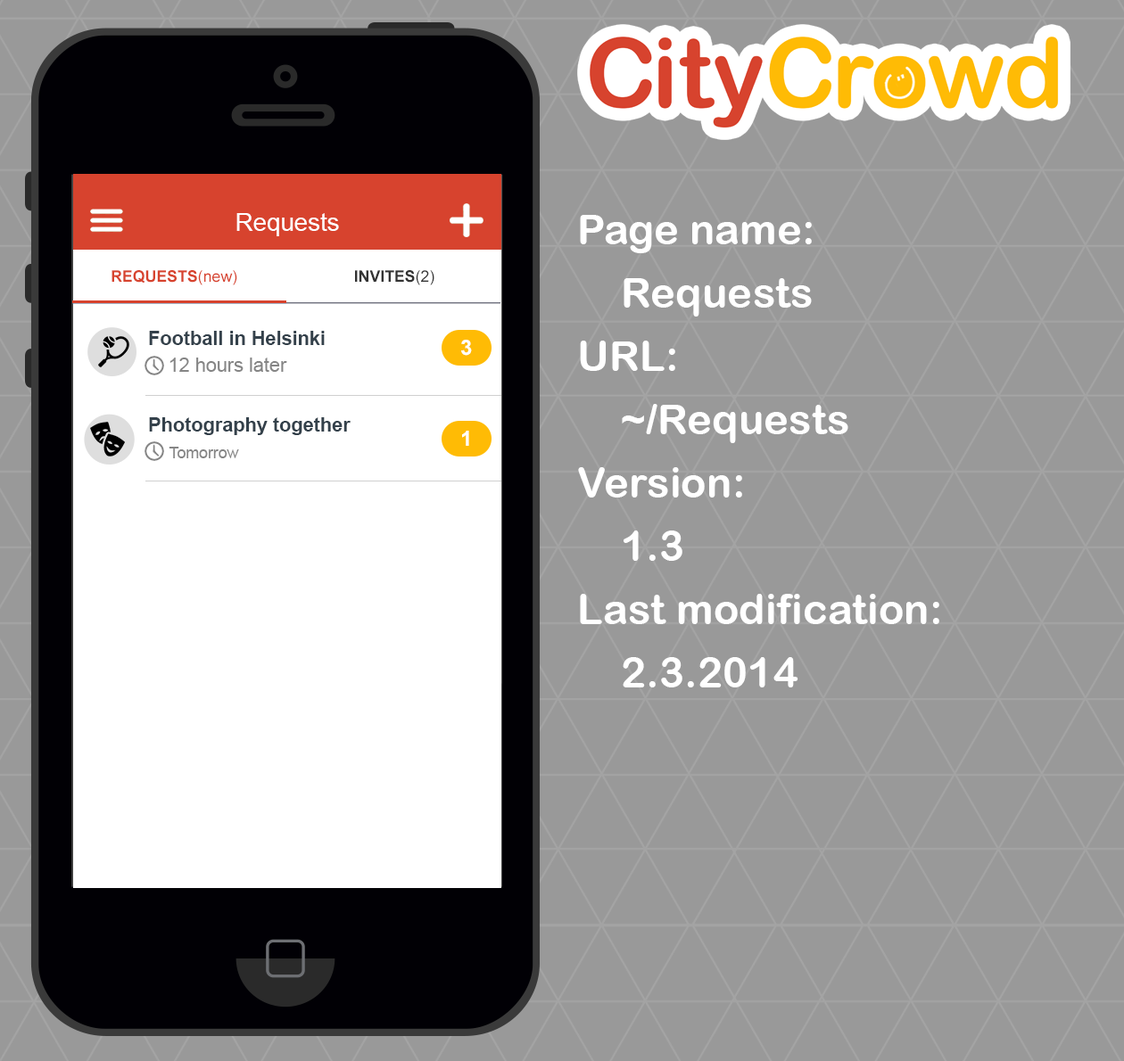
<style>
.page{position:relative;width:1124px;height:1061px;background:#999999}
.page>*{position:absolute;margin:0}
.t1{font:24.6px "ArialMT";color:#ffffff}
.t2{font:42.2px/63.3px "ArialRoundedMTBold";color:#ffffff}
.t3{font:15.8px "Arial-BoldMT";color:#d7432e;text-transform:uppercase}
.t4{font:15.8px "ArialMT";color:#d7432e;text-transform:uppercase}
.t5{font:15.8px "ArialMT";color:#d7432e}
.t6{font:15.8px "Arial-BoldMT";color:#333333;text-transform:uppercase}
.t7{font:15.8px "ArialMT";color:#333333;text-transform:uppercase}
.t8{font:19.3px "Arial-BoldMT";color:#34414b}
.t9{font:21.1px "Arial-BoldMT";color:#ffffff}
.t10{font:19.3px "ArialMT";color:#858585}
.t11{font:15.8px "ArialMT";color:#858585}
</style>
<div class="page">
<p class="t1" style="left:236px;top:213px;width:103px;height:23px">Requests</p>
<p class="t2" style="left:578px;top:215px;width:361px;height:473px">Page name:<br>Requests<br>URL:<br>~/Requests<br>Version:<br>1.3<br>Last modification:<br>2.3.2014</p>
<p class="t3" style="left:111px;top:270px;width:126px;height:15px">REQUESTS<span class="t4">(</span><span class="t5">new</span><span class="t4">)</span></p>
<p class="t6" style="left:355px;top:270px;width:79px;height:15px">INVITES<span class="t7">(2)</span></p>
<p class="t8" style="left:149px;top:331px;width:176px;height:14px">Football in Helsinki</p>
<p class="t9" style="left:461px;top:340px;width:11px;height:16px">3</p>
<p class="t10" style="left:169px;top:358px;width:118px;height:14px">12 hours later</p>
<p class="t8" style="left:149px;top:417px;width:201px;height:18px">Photography together</p>
<p class="t9" style="left:462px;top:431px;width:7px;height:15px">1</p>
<p class="t11" style="left:169px;top:447px;width:70px;height:11px">Tomorrow</p>
</div>
